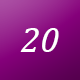
<style>
.page{position:relative;width:80px;height:80px}
.page>*{position:absolute;margin:0}
.t1{font:36px "Cambria-Italic";color:#ffffff}
</style>
<div class="page">
<p class="t1" style="left:20px;top:28px;width:39px;height:24px">20</p>
</div>
